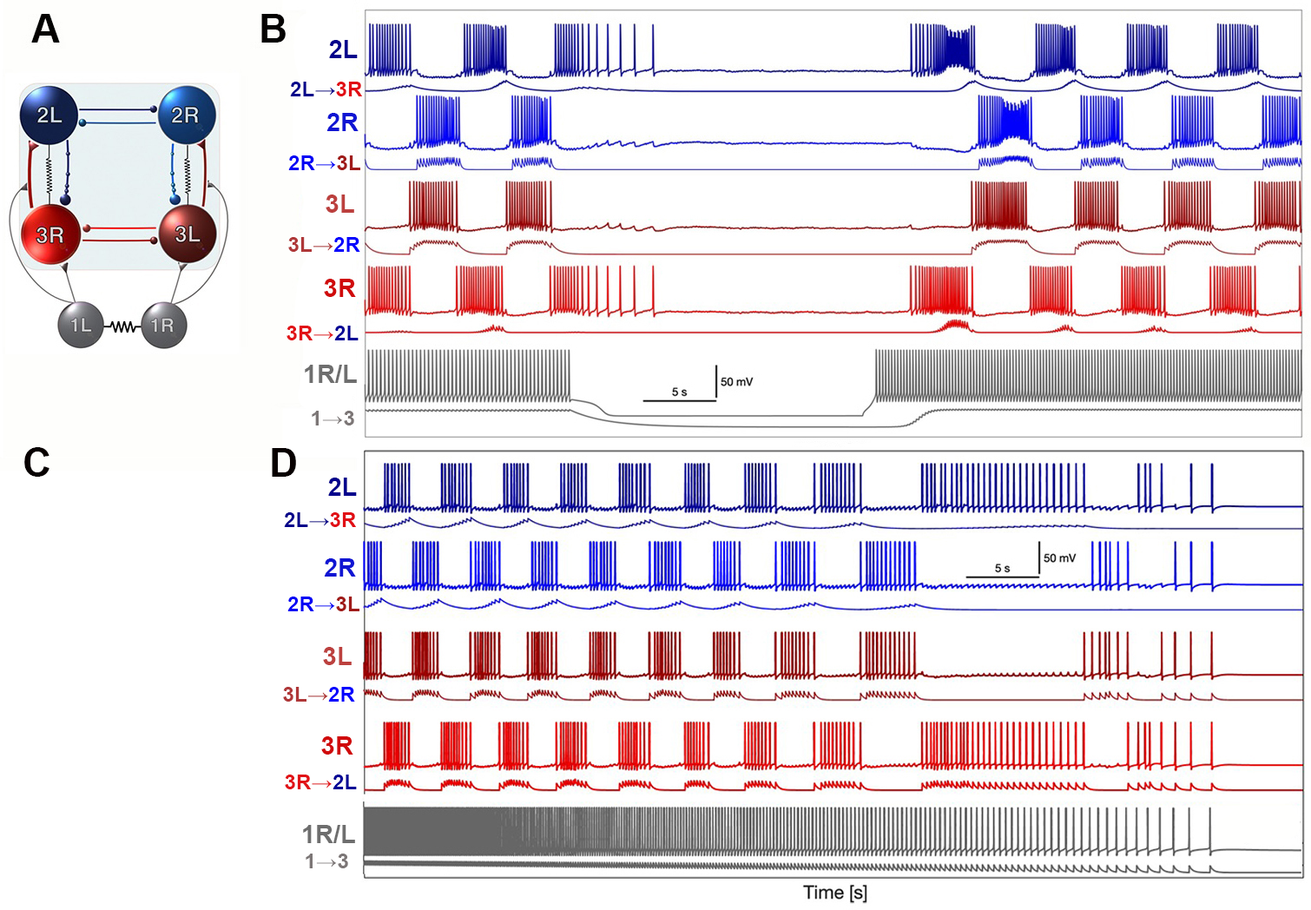
<style>
.page{position:relative;width:1311px;height:910px;background:#ffffff}
.page>*{position:absolute;margin:0}
.t1{font:43.4px "Arial-BoldMT";color:#02008c;font-variant:small-caps}
.t2{font:36.2px "Arial-BoldMT";color:#03008b;font-variant:small-caps}
.t3{font:36.2px "Arial-BoldMT";color:#e10e15;font-variant:small-caps}
.t4{font:43.4px "Arial-BoldMT";color:#1015d3;font-variant:small-caps}
.t5{font:36.2px "Arial-BoldMT";color:#0201f5;font-variant:small-caps}
.t6{font:36.2px "Arial-BoldMT";color:#a01b19;font-variant:small-caps}
.t7{font:43.4px "Arial-BoldMT";color:#bc403e;font-variant:small-caps}
.t8{font:36.2px "Arial-BoldMT";color:#af3738;font-variant:small-caps}
.t9{font:36.2px "Arial-BoldMT";color:#0300fd;font-variant:small-caps}
.t10{font:43.4px "Arial-BoldMT";color:#d00a0b;font-variant:small-caps}
.t11{font:36.2px "Arial-BoldMT";color:#e11317;font-variant:small-caps}
.t12{font:36.2px "Arial-BoldMT";color:#000096;font-variant:small-caps}
.t13{font:43.4px "Arial-BoldMT";color:#6e6e6e;font-variant:small-caps}
.t14{font:36.2px "Arial-BoldMT";color:#7c7676;font-variant:small-caps}
.t15{font:68.7px "Arial-BoldMT";color:#080000;font-variant:small-caps}
</style>
<div class="page">
<p class="t1" style="left:329px;top:40px;width:29px;height:18px">2L</p>
<p class="t2" style="left:290px;top:82px;width:72px;height:14px">2L→<span class="t3">3R</span></p>
<p class="t4" style="left:326px;top:113px;width:33px;height:18px">2R</p>
<p class="t5" style="left:288px;top:155px;width:72px;height:15px">2R→<span class="t6">3L</span></p>
<p class="t7" style="left:326px;top:194px;width:28px;height:19px">3L</p>
<p class="t8" style="left:288px;top:237px;width:72px;height:15px">3L→<span class="t9">2R</span></p>
<p class="t10" style="left:324px;top:279px;width:32px;height:18px">3R</p>
<p class="t11" style="left:286px;top:326px;width:73px;height:14px">3R→<span class="t12">2L</span></p>
<p class="t13" style="left:305px;top:365px;width:52px;height:18px">1R/L</p>
<p class="t14" style="left:312px;top:411px;width:42px;height:14px">1→3</p>
<p class="t15" style="left:24px;top:447px;width:25px;height:30px">C</p>
<p class="t15" style="left:272px;top:448px;width:24px;height:29px">D</p>
<p class="t1" style="left:328px;top:477px;width:29px;height:19px">2L</p>
<p class="t2" style="left:284px;top:512px;width:72px;height:15px">2L→<span class="t3">3R</span></p>
<p class="t4" style="left:324px;top:558px;width:32px;height:18px">2R</p>
<p class="t5" style="left:287px;top:596px;width:72px;height:15px">2R→<span class="t6">3L</span></p>
<p class="t7" style="left:323px;top:647px;width:29px;height:18px">3L</p>
<p class="t8" style="left:283px;top:687px;width:72px;height:14px">3L→<span class="t9">2R</span></p>
<p class="t10" style="left:321px;top:736px;width:32px;height:18px">3R</p>
<p class="t11" style="left:285px;top:774px;width:72px;height:15px">3R→<span class="t12">2L</span></p>
<p class="t13" style="left:303px;top:825px;width:52px;height:18px">1R/L</p>
<p class="t14" style="left:306px;top:853px;width:42px;height:15px">1→3</p>
</div>
